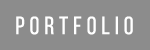
<style>
.page{position:relative;width:150px;height:50px;background:#8c8c8c}
.page>*{position:absolute;margin:0}
.t1{font:25px "BebasNeueRegular";letter-spacing:0.2em;color:#ffffff}
</style>
<div class="page">
<p class="t1" style="left:16px;top:16px;width:117px;height:19px">portfolio</p>
</div>
